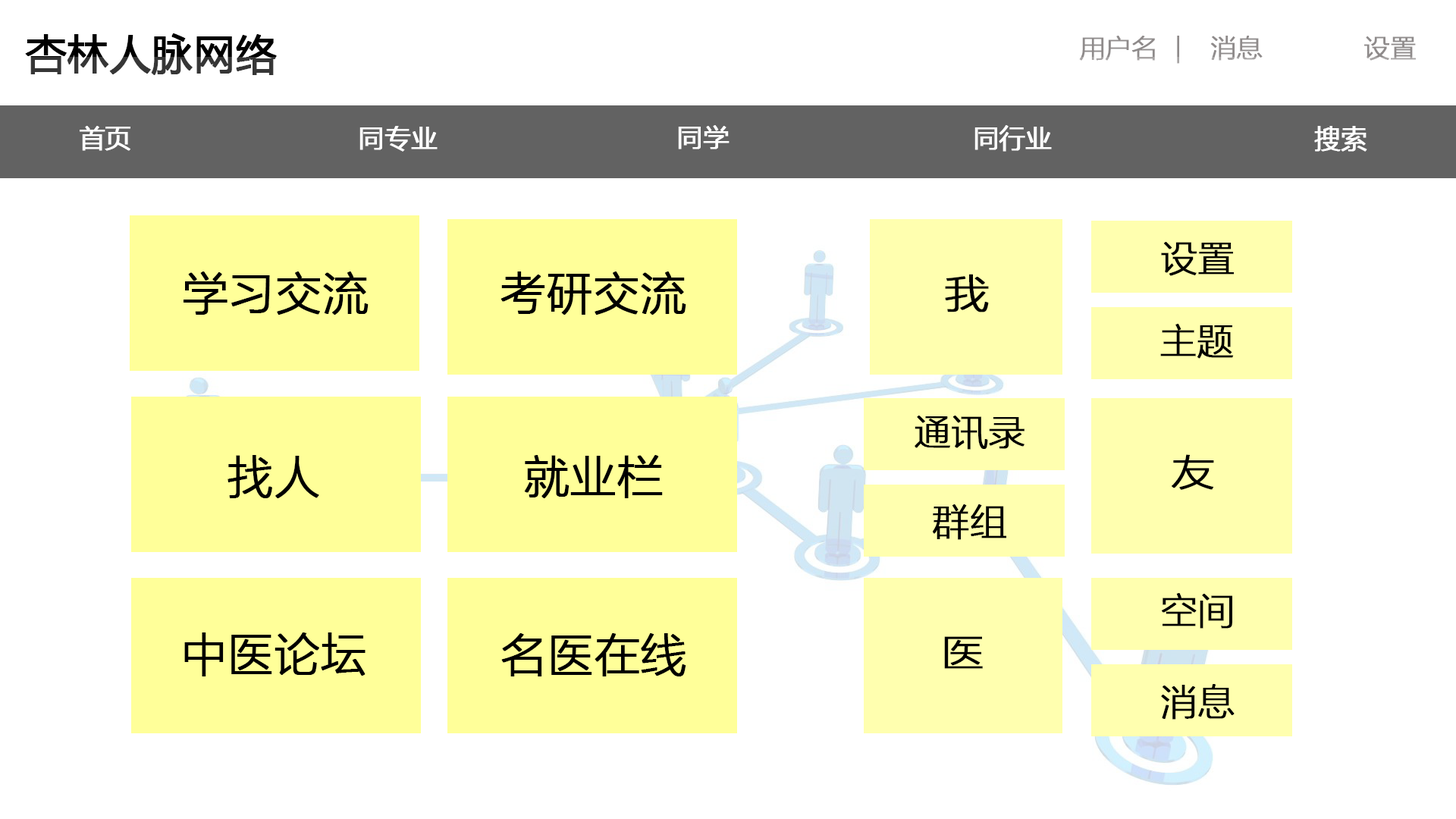
<style>
.page{position:relative;width:1456px;height:819px;background:#ffffff}
.page>*{position:absolute;margin:0}
.t1{font:40.9px "MicrosoftYaHei";font-weight:bold}
.t2{font:25.8px "MicrosoftYaHeiLight";color:#8f8b8b;font-weight:bold}
.t3{font:25.8px "MicrosoftYaHei";color:#ffffff;font-weight:bold}
.t4{font:36.4px "MicrosoftYaHeiLight";color:#000000;font-weight:bold}
.t5{font:45.5px "MicrosoftYaHeiLight";color:#000000;font-weight:bold}
.t6{font:39.9px "MicrosoftYaHeiLight";color:#000000;font-weight:bold;scale:1.11 1}
.t7{font:36.4px "MicrosoftYaHeiLight";color:#000000;font-weight:bold;scale:1.19 1}
.t8{font:36.7px "MicrosoftYaHeiLight";color:#000000;font-weight:bold;scale:1.17 1}
</style>
<div class="page">
<p class="t1" style="left:25px;top:33px;width:252px;height:42px">杏林人脉网络</p>
<p class="t2" style="left:1079px;top:36px;width:100px;height:28px">用户名  |</p>
<p class="t2" style="left:1210px;top:36px;width:53px;height:25px">消息</p>
<p class="t2" style="left:1364px;top:36px;width:52px;height:25px">设置</p>
<p class="t3" style="left:80px;top:126px;width:50px;height:25px">首页</p>
<p class="t3" style="left:359px;top:126px;width:79px;height:26px">同专业</p>
<p class="t3" style="left:678px;top:125px;width:52px;height:24px">同学</p>
<p class="t3" style="left:974px;top:125px;width:78px;height:27px">同行业</p>
<p class="t3" style="left:1314px;top:126px;width:53px;height:26px">搜索</p>
<p class="t4" style="left:1161px;top:242px;width:73px;height:34px">设置</p>
<p class="t5" style="left:184px;top:271px;width:185px;height:44px">学习交流</p>
<p class="t5" style="left:500px;top:271px;width:186px;height:44px">考研交流</p>
<p class="t6" style="left:945px;top:274px;width:44px;height:38px">我</p>
<p class="t4" style="left:1160px;top:324px;width:74px;height:35px">主题</p>
<p class="t4" style="left:915px;top:416px;width:109px;height:34px">通讯录</p>
<p class="t5" style="left:227px;top:455px;width:92px;height:43px">找人</p>
<p class="t5" style="left:524px;top:455px;width:139px;height:43px">就业栏</p>
<p class="t7" style="left:1172px;top:454px;width:42px;height:36px">友</p>
<p class="t4" style="left:932px;top:504px;width:74px;height:36px">群组</p>
<p class="t4" style="left:1162px;top:593px;width:70px;height:36px">空间</p>
<p class="t5" style="left:184px;top:632px;width:182px;height:44px">中医论坛</p>
<p class="t5" style="left:501px;top:633px;width:185px;height:43px">名医在线</p>
<p class="t8" style="left:944px;top:636px;width:39px;height:33px">医</p>
<p class="t4" style="left:1161px;top:684px;width:74px;height:36px">消息</p>
</div>
